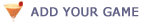
<style>
.page{position:relative;width:150px;height:23px;background:#ffffff}
.page>*{position:absolute;margin:0}
.t1{font:12px "Verdana";color:#636388;font-weight:bold}
</style>
<div class="page">
<p class="t1" style="left:30px;top:7px;width:109px;height:10px">ADD YOUR GAME</p>
</div>
